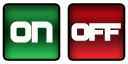
<style>
.page{position:relative;width:128px;height:64px;background:#ffffff}
.page>*{position:absolute;margin:0}
.t1{font:30px "SFAutomaton-Bold";letter-spacing:-0.01em;color:#ffffff;font-weight:bold}
.t2{font:25px "SFAutomaton-Bold";letter-spacing:-0.01em;color:#ffffff;font-weight:bold}
</style>
<div class="page">
<p class="t1" style="left:10px;top:21px;width:43px;height:22px">ON</p>
<p class="t2" style="left:71px;top:23px;width:50px;height:18px">off</p>
</div>
